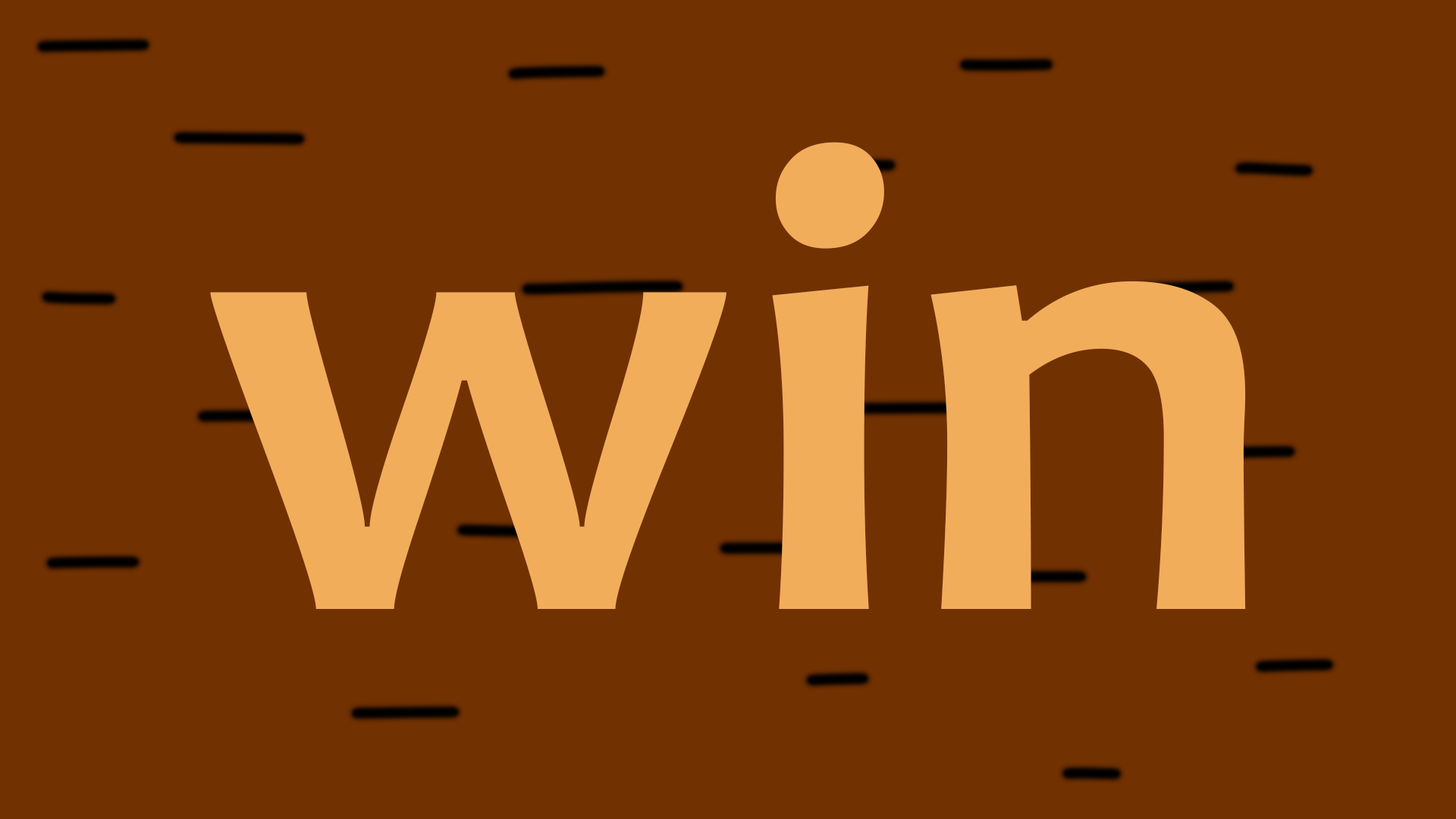
<style>
.page{position:relative;width:1456px;height:819px;background:#723101}
.page>*{position:absolute;margin:0}
.t1{font:682.5px "Candara-Bold";color:#f2ad5b}
</style>
<div class="page">
<p class="t1" style="left:210px;top:142px;width:1036px;height:467px">win</p>
</div>
